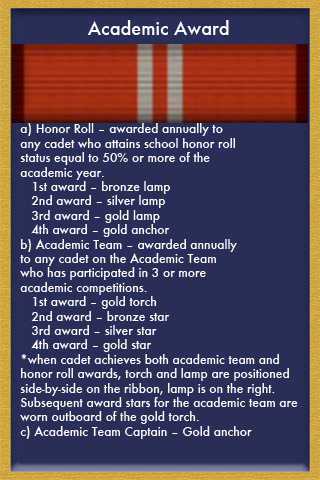
<style>
.page{position:relative;width:320px;height:480px;background:#292e59}
.page>*{position:absolute;margin:0}
.t1{font:18px "Futura-Medium";color:#ffffff}
.t2{font:12px "Futura-Medium";color:#ffffff}
</style>
<div class="page">
<p class="t1" style="left:87px;top:20px;width:142px;height:15px">Academic Award</p>
<p class="t2" style="left:20px;top:123px;width:278px;height:316px">a) Honor Roll – awarded annually to <br>any cadet who attains school honor roll <br>status equal to 50% or more of the <br>academic year.<br>   1st award – bronze lamp<br>   2nd award – silver lamp<br>   3rd award – gold lamp<br>   4th award – gold anchor<br>b) Academic Team – awarded annually <br>to any cadet on the Academic Team <br>who has participated in 3 or more <br>academic competitions.<br>   1st award – gold torch<br>   2nd award – bronze star<br>   3rd award – silver star<br>   4th award – gold star<br>*when cadet achieves both academic team and <br>honor roll awards, torch and lamp are positioned <br>side-by-side on the ribbon, lamp is on the right. <br>Subsequent award stars for the academic team are <br>worn outboard of the gold torch.<br>c) Academic Team Captain – Gold anchor</p>
</div>
